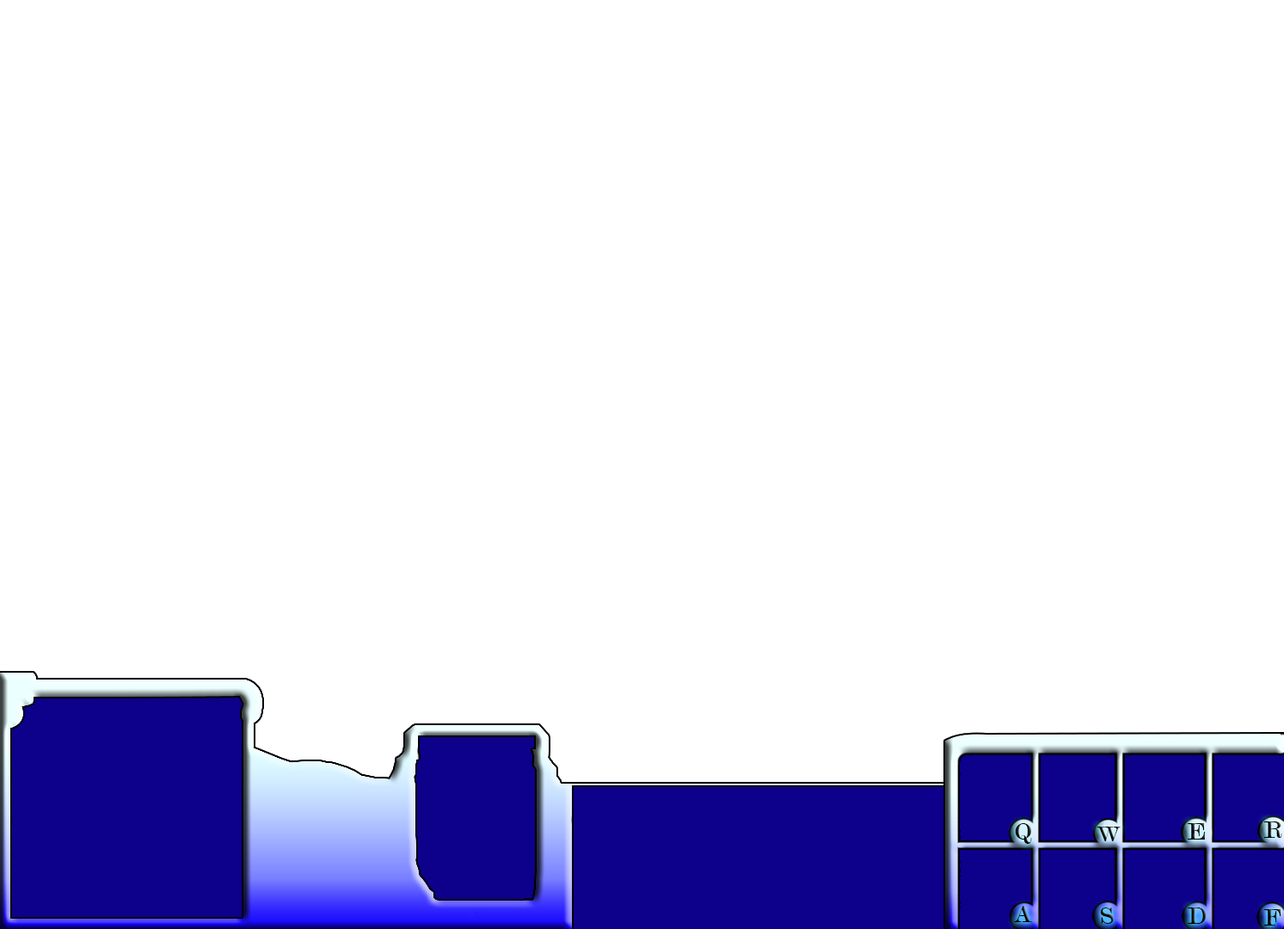
<style>
.page{position:relative;width:1284px;height:929px;background:#ffffff}
.page>*{position:absolute;margin:0}
.t1{font:25.8px "Modern-Regular";color:#000000}
.t2{font:23.2px "Modern-Regular"}
.t3{font:25.8px "Modern-Regular"}
</style>
<div class="page">
<p class="t1" style="left:1264px;top:821px;width:18px;height:17px">R</p>
<p class="t1" style="left:1015px;top:823px;width:17px;height:21px">Q</p>
<p class="t2" style="left:1096px;top:826px;width:25px;height:15px">W</p>
<p class="t3" style="left:1188px;top:823px;width:17px;height:16px">E</p>
<p class="t1" style="left:1014px;top:906px;width:19px;height:16px">A</p>
<p class="t1" style="left:1100px;top:907px;width:14px;height:17px">S</p>
<p class="t1" style="left:1188px;top:907px;width:19px;height:17px">D</p>
<p class="t3" style="left:1264px;top:909px;width:16px;height:16px">F</p>
</div>
